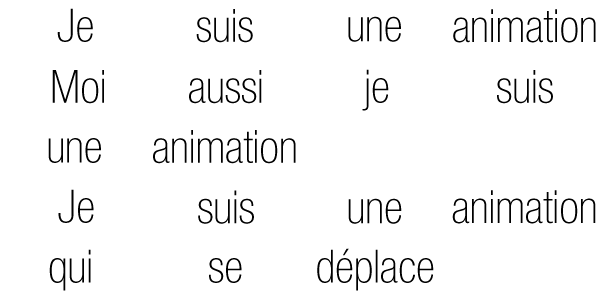
<style>
.page{position:relative;width:600px;height:300px;background:#ffffff}
.page>*{position:absolute;margin:0}
.t1{font:46px "HelveticaNeueLTStd-ThCn";color:#000000}
</style>
<div class="page">
<p class="t1" style="left:57px;top:8px;width:36px;height:34px">Je</p>
<p class="t1" style="left:196px;top:9px;width:57px;height:34px">suis</p>
<p class="t1" style="left:348px;top:16px;width:53px;height:26px">une</p>
<p class="t1" style="left:453px;top:9px;width:143px;height:34px">animation</p>
<p class="t1" style="left:52px;top:70px;width:52px;height:34px">Moi</p>
<p class="t1" style="left:189px;top:70px;width:73px;height:34px">aussi</p>
<p class="t1" style="left:362px;top:69px;width:27px;height:42px">je</p>
<p class="t1" style="left:497px;top:70px;width:56px;height:34px">suis</p>
<p class="t1" style="left:153px;top:130px;width:143px;height:34px">animation</p>
<p class="t1" style="left:48px;top:138px;width:53px;height:25px">une</p>
<p class="t1" style="left:58px;top:189px;width:36px;height:34px">Je</p>
<p class="t1" style="left:198px;top:190px;width:56px;height:34px">suis</p>
<p class="t1" style="left:348px;top:198px;width:54px;height:26px">une</p>
<p class="t1" style="left:452px;top:190px;width:144px;height:34px">animation</p>
<p class="t1" style="left:49px;top:249px;width:42px;height:42px">qui</p>
<p class="t1" style="left:317px;top:248px;width:117px;height:43px">déplace</p>
<p class="t1" style="left:209px;top:258px;width:33px;height:25px">se</p>
</div>
